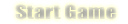
<style>
.page{position:relative;width:128px;height:24px;background:#ffffff}
.page>*{position:absolute;margin:0}
.t1{font:18px "Impact";color:#c9c8bb;scale:1.25 1}
</style>
<div class="page">
<p class="t1" style="left:15px;top:4px;width:102px;height:16px">Start Game</p>
</div>
